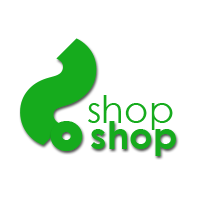
<style>
.page{position:relative;width:200px;height:200px;background:#ffffff}
.page>*{position:absolute;margin:0}
.t1{font:149.3px "Bauhaus93";color:#16ab1d}
.t2{font:37.3px "CenturyGothic";color:#16ab1d}
.t3{font:62.2px "Bauhaus93";color:#16ab1d}
.t4{font:37.3px "CenturyGothic-Bold";color:#16ab1d}
</style>
<div class="page">
<p class="t1" style="left:20px;top:38px;width:77px;height:107px;rotate:-135deg">S</p>
<p class="t2" style="left:88px;top:95px;width:85px;height:35px">shop</p>
<p class="t3" style="left:50px;top:121px;width:33px;height:30px">o</p>
<p class="t4" style="left:91px;top:121px;width:85px;height:35px">shop</p>
</div>
